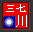
<style>
.page{position:relative;width:33px;height:32px;background:#f20000}
.page>*{position:absolute;margin:0}
.t1{font:10.4px "SimSun";color:#ffffff}
.t2{font:11.7px "SimSun";color:#ffffff}
</style>
<div class="page">
<p class="t1" style="left:6px;top:4px;width:20px;height:8px">三七</p>
<p class="t2" style="left:16px;top:15px;width:11px;height:12px">川</p>
</div>
